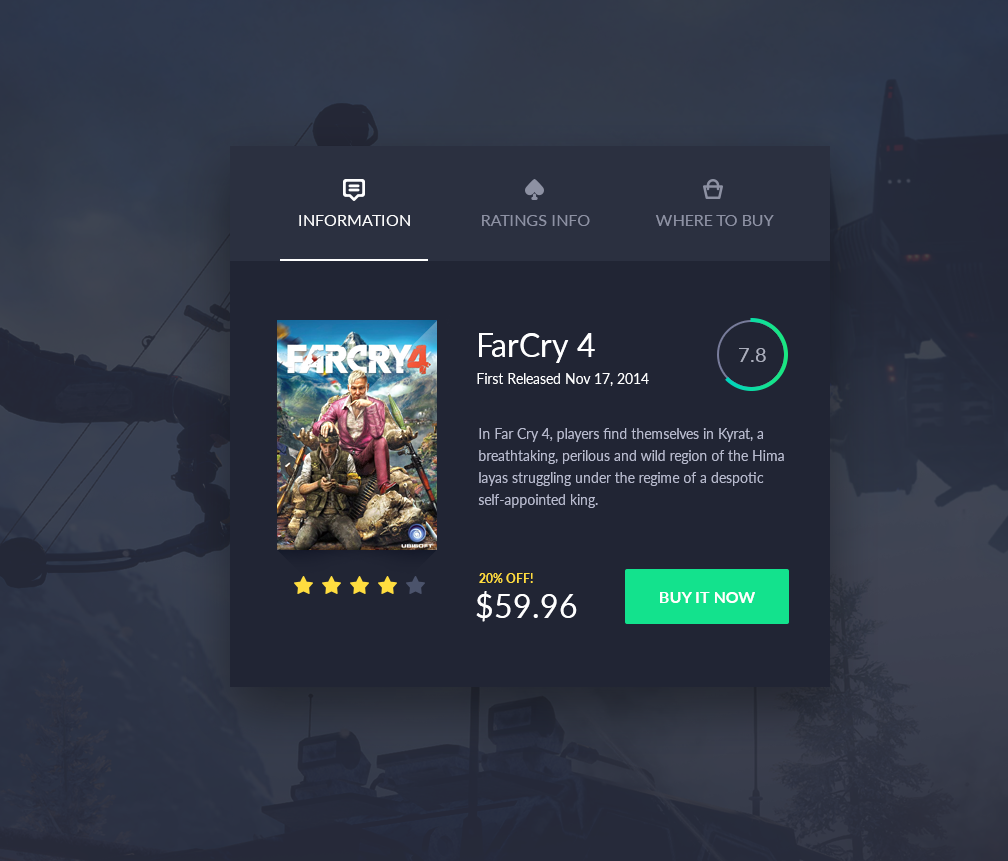
<style>
.page{position:relative;width:1008px;height:861px;background:#212534}
.page>*{position:absolute;margin:0}
.t1{font:16px "Lato-Regular";color:#fbfbfb}
.t2{font:16px "Lato-Regular";color:#8d91a3}
.t3{font:32px "Lato-Regular";color:#ffffff}
.t4{font:20px "Lato-Regular";color:#aaadbb}
.t5{font:14px "Lato-Regular";color:#fdfdfd}
.t6{font:14px/22px "Lato-Regular";color:#b7bacd}
.t7{font:12px "Lato-Bold";color:#fedc3f}
.t8{font:16px "Lato-Bold";color:#ffffff}
</style>
<div class="page">
<p class="t1" style="left:299px;top:215px;width:111px;height:11px">INFORMATION</p>
<p class="t2" style="left:482px;top:215px;width:108px;height:11px">RATINGS INFO</p>
<p class="t2" style="left:655px;top:215px;width:119px;height:11px">WHERE TO BUY</p>
<p class="t3" style="left:479px;top:333px;width:116px;height:30px">FarCry 4</p>
<p class="t4" style="left:739px;top:348px;width:27px;height:14px">7.8</p>
<p class="t5" style="left:477px;top:373px;width:172px;height:13px">First Released Nov 17, 2014</p>
<p class="t6" style="left:478px;top:428px;width:306px;height:80px">In Far Cry 4, players find themselves in Kyrat, a breathtaking, perilous and wild region of the Hima<br>layas struggling under the regime of a despotic self-appointed king.</p>
<p class="t7" style="left:479px;top:573px;width:54px;height:10px">20% OFF!</p>
<p class="t3" style="left:476px;top:591px;width:101px;height:31px">$59.96</p>
<p class="t8" style="left:660px;top:592px;width:95px;height:11px">BUY IT NOW</p>
</div>
